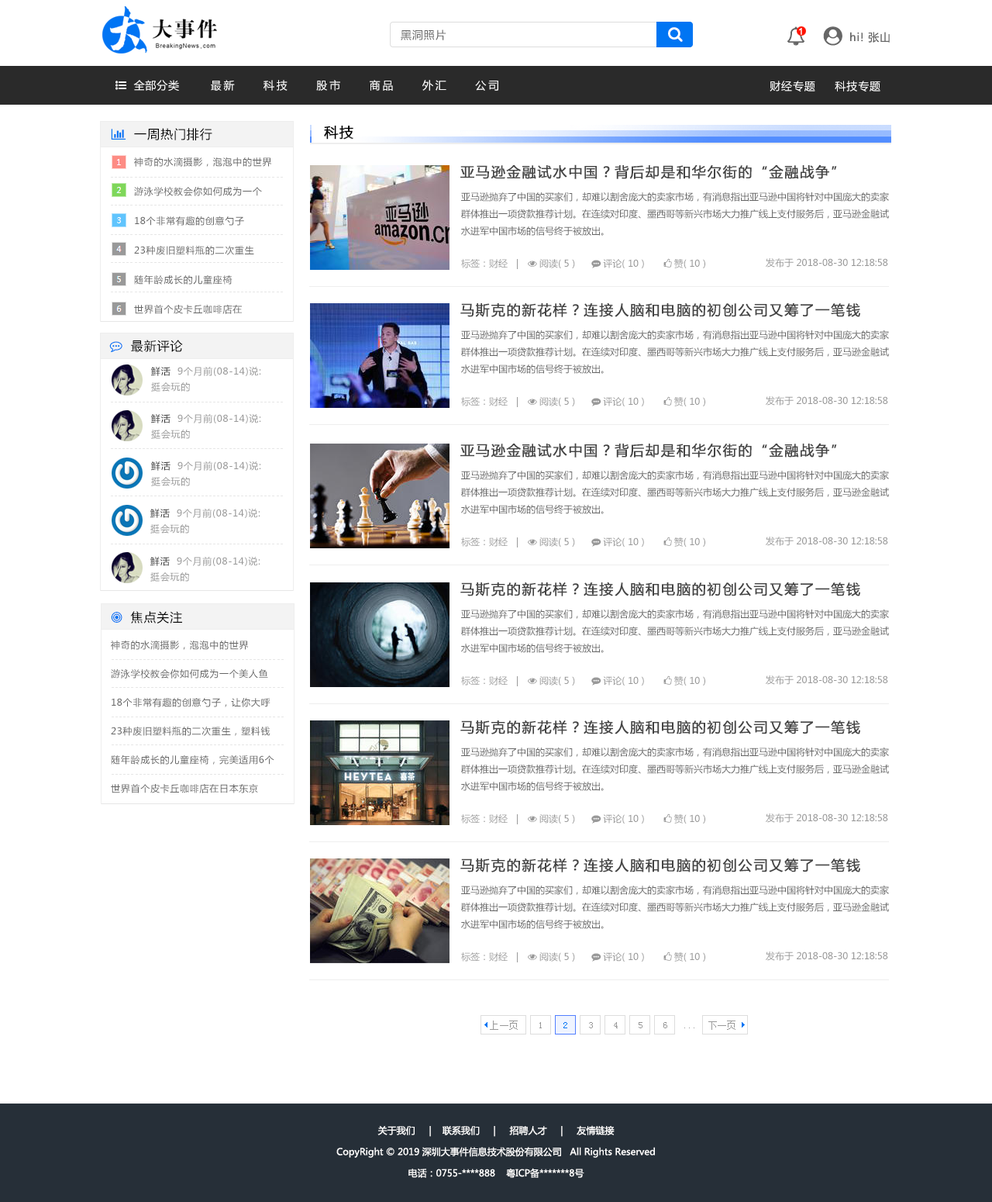
<style>
.page{position:relative;width:992px;height:1202px;background:#ffffff}
.page>*{position:absolute;margin:0}
.t1{font:10.9px "MicrosoftYaHei";letter-spacing:0.06em;color:#666666}
.t2{font:9.3px "ArialMT";letter-spacing:0.06em;color:#ffffff}
.t3{font:10.9px "MicrosoftYaHei";letter-spacing:0.06em;color:#ffffff}
.t4{font:14px "MicrosoftYaHei";letter-spacing:0.06em;color:#000000;font-weight:bold}
.t5{font:14px "MicrosoftYaHei";letter-spacing:0.06em;color:#000000}
.t6{font:9.3px/29.5px "MicrosoftYaHei";letter-spacing:0.06em;color:#666666}
.t7{font:14px "MicrosoftYaHei";letter-spacing:0.08em;color:#444444;font-weight:bold}
.t8{font:9.3px/17.1px "MicrosoftYaHei";color:#666666}
.t9{font:9.3px "MicrosoftYaHei";color:#999999}
.t10{font:9.3px/15.5px "MicrosoftYaHei";letter-spacing:0.06em;color:#999999}
.t11{font:9.3px/15.5px "MicrosoftYaHei";letter-spacing:0.06em;color:#333333}
.t12{font:9.3px/28.7px "MicrosoftYaHei";letter-spacing:0.06em;color:#666666}
.t13{font:9.3px/21.3px "MicrosoftYaHei";color:#ffffff}
</style>
<div class="page">
<p class="t1" style="left:401px;top:29px;width:46px;height:11px">黑洞照片</p>
<p class="t2" style="left:799px;top:28px;width:3px;height:7px">1</p>
<p class="t1" style="left:850px;top:32px;width:40px;height:11px">hi! 张山</p>
<p class="t3" style="left:770px;top:81px;width:111px;height:10px">财经专题     科技专题</p>
<p class="t4" style="left:324px;top:126px;width:30px;height:14px"><span class="t5"> </span>科技</p>
<p class="t6" style="left:134px;top:157px;width:138px;height:157px">神奇的水滴摄影，泡泡中的世界<br>游泳学校教会你如何成为一个<br>18个非常有趣的创意勺子<br>23种废旧塑料瓶的二次重生<br>随年龄成长的儿童座椅<br>世界首个皮卡丘咖啡店在</p>
<p class="t7" style="left:461px;top:164px;width:376px;height:15px">亚马逊金融试水中国？背后却是和华尔街的“金融战争”</p>
<p class="t8" style="left:461px;top:191px;width:428px;height:45px">亚马逊抛弃了中国的买家们，却难以割舍庞大的卖家市场，有消息指出亚马逊中国将针对中国庞大的卖家群体推出一项贷款推荐计划。在连续对印度、墨西哥等新兴市场大力推广线上支付服务后，亚马逊金融试水进军中国市场的信号终于被放出。</p>
<p class="t9" style="left:766px;top:258px;width:122px;height:9px">发布于 2018-08-30 12:18:58</p>
<p class="t7" style="left:461px;top:302px;width:400px;height:15px">马斯克的新花样？连接人脑和电脑的初创公司又筹了一笔钱</p>
<p class="t8" style="left:461px;top:329px;width:428px;height:45px">亚马逊抛弃了中国的买家们，却难以割舍庞大的卖家市场，有消息指出亚马逊中国将针对中国庞大的卖家群体推出一项贷款推荐计划。在连续对印度、墨西哥等新兴市场大力推广线上支付服务后，亚马逊金融试水进军中国市场的信号终于被放出。</p>
<p class="t10" style="left:151px;top:367px;width:110px;height:25px"><span class="t11">鲜活  </span>9个月前(08-14)说:<br>挺会玩的</p>
<p class="t9" style="left:766px;top:396px;width:122px;height:9px">发布于 2018-08-30 12:18:58</p>
<p class="t10" style="left:151px;top:414px;width:110px;height:25px"><span class="t11">鲜活  </span>9个月前(08-14)说:<br>挺会玩的</p>
<p class="t7" style="left:461px;top:443px;width:376px;height:14px">亚马逊金融试水中国？背后却是和华尔街的“金融战争”</p>
<p class="t10" style="left:151px;top:461px;width:110px;height:25px"><span class="t11">鲜活  </span>9个月前(08-14)说:<br>挺会玩的</p>
<p class="t8" style="left:461px;top:470px;width:428px;height:44px">亚马逊抛弃了中国的买家们，却难以割舍庞大的卖家市场，有消息指出亚马逊中国将针对中国庞大的卖家群体推出一项贷款推荐计划。在连续对印度、墨西哥等新兴市场大力推广线上支付服务后，亚马逊金融试水进军中国市场的信号终于被放出。</p>
<p class="t10" style="left:150px;top:509px;width:110px;height:24px"><span class="t11">鲜活  </span>9个月前(08-14)说:<br>挺会玩的</p>
<p class="t9" style="left:766px;top:536px;width:122px;height:10px">发布于 2018-08-30 12:18:58</p>
<p class="t10" style="left:150px;top:557px;width:110px;height:24px"><span class="t11">鲜活  </span>9个月前(08-14)说:<br>挺会玩的</p>
<p class="t7" style="left:461px;top:581px;width:400px;height:15px">马斯克的新花样？连接人脑和电脑的初创公司又筹了一笔钱</p>
<p class="t8" style="left:461px;top:609px;width:428px;height:44px">亚马逊抛弃了中国的买家们，却难以割舍庞大的卖家市场，有消息指出亚马逊中国将针对中国庞大的卖家群体推出一项贷款推荐计划。在连续对印度、墨西哥等新兴市场大力推广线上支付服务后，亚马逊金融试水进军中国市场的信号终于被放出。</p>
<p class="t12" style="left:111px;top:640px;width:163px;height:153px">神奇的水滴摄影，泡泡中的世界<br>游泳学校教会你如何成为一个美人鱼<br>18个非常有趣的创意勺子，让你大呼<br>23种废旧塑料瓶的二次重生，塑料钱<br>随年龄成长的儿童座椅，完美适用6个<br>世界首个皮卡丘咖啡店在日本东京</p>
<p class="t9" style="left:766px;top:675px;width:122px;height:10px">发布于 2018-08-30 12:18:58</p>
<p class="t7" style="left:461px;top:719px;width:400px;height:15px">马斯克的新花样？连接人脑和电脑的初创公司又筹了一笔钱</p>
<p class="t8" style="left:461px;top:747px;width:428px;height:44px">亚马逊抛弃了中国的买家们，却难以割舍庞大的卖家市场，有消息指出亚马逊中国将针对中国庞大的卖家群体推出一项贷款推荐计划。在连续对印度、墨西哥等新兴市场大力推广线上支付服务后，亚马逊金融试水进军中国市场的信号终于被放出。</p>
<p class="t9" style="left:766px;top:813px;width:122px;height:10px">发布于 2018-08-30 12:18:58</p>
<p class="t7" style="left:461px;top:857px;width:400px;height:15px">马斯克的新花样？连接人脑和电脑的初创公司又筹了一笔钱</p>
<p class="t8" style="left:461px;top:885px;width:428px;height:44px">亚马逊抛弃了中国的买家们，却难以割舍庞大的卖家市场，有消息指出亚马逊中国将针对中国庞大的卖家群体推出一项贷款推荐计划。在连续对印度、墨西哥等新兴市场大力推广线上支付服务后，亚马逊金融试水进军中国市场的信号终于被放出。</p>
<p class="t9" style="left:766px;top:951px;width:122px;height:10px">发布于 2018-08-30 12:18:58</p>
<p class="t13" style="left:336px;top:1125px;width:319px;height:53px;text-align:center">关于我们     |    联系我们     |     招聘人才     |     友情链接<br>CopyRight © 2019 深圳大事件信息技术股份有限公司   All Rights Reserved<br>电话：0755-****888    粤ICP备*******8号</p>
</div>
